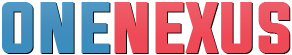
<style>
.page{position:relative;width:292px;height:55px;background:#ffffff}
.page>*{position:absolute;margin:0}
.t1{font:60px "Evogria";color:#ee4957;font-weight:bold}
.t2{font:60px "Evogria";color:#3b8dbd;font-weight:bold}
</style>
<div class="page">
<p class="t1" style="left:2px;top:2px;width:288px;height:51px"><span class="t2">ONE</span>NEXUS</p>
</div>
